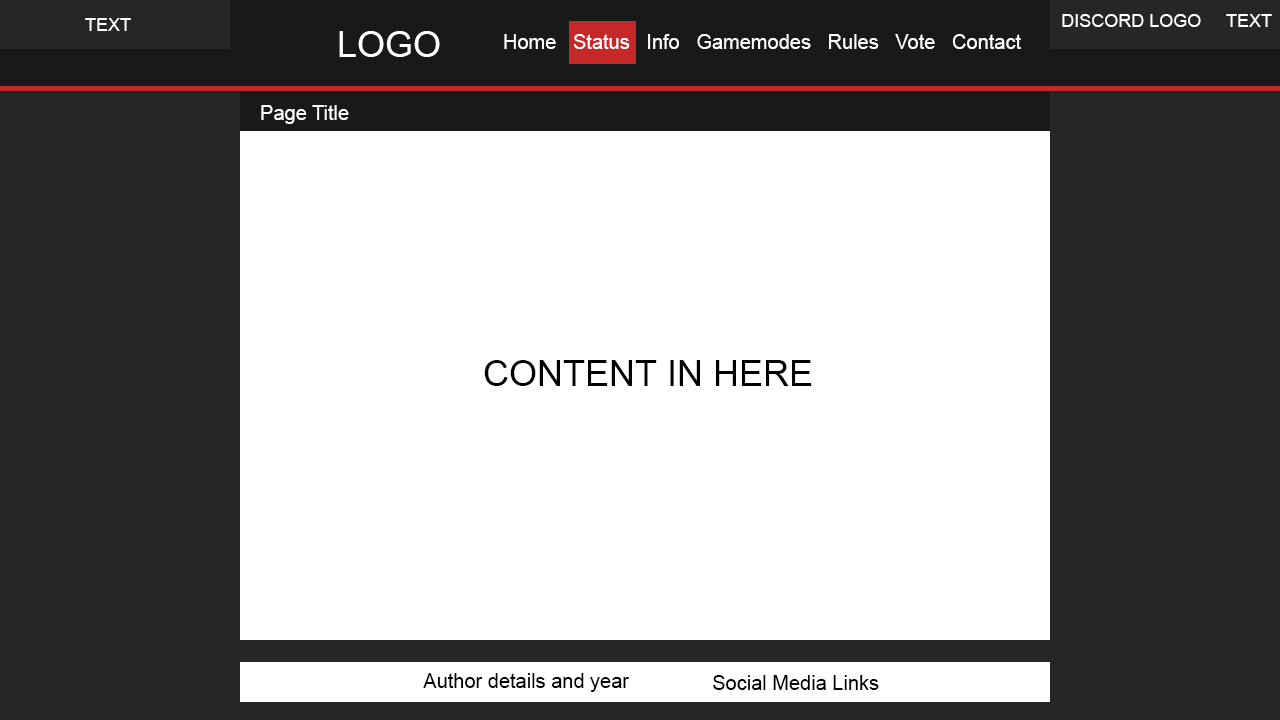
<style>
.page{position:relative;width:1280px;height:720px;background:#ffffff}
.page>*{position:absolute;margin:0}
.t1{font:18px "ArialMT";color:#ffffff}
.t2{font:36px "ArialMT";color:#ffffff}
.t3{font:20px "ArialMT";color:#ffffff}
.t4{font:36px "ArialMT";color:#000000}
.t5{font:20px "ArialMT";color:#000000}
</style>
<div class="page">
<p class="t1" style="left:1062px;top:14px;width:210px;height:13px">DISCORD LOGO     TEXT</p>
<p class="t1" style="left:85px;top:18px;width:46px;height:13px">TEXT</p>
<p class="t2" style="left:339px;top:31px;width:101px;height:26px">LOGO</p>
<p class="t3" style="left:504px;top:34px;width:517px;height:15px">Home   Status   Info   Gamemodes   Rules   Vote   Contact</p>
<p class="t3" style="left:261px;top:105px;width:88px;height:19px">Page Title</p>
<p class="t4" style="left:484px;top:360px;width:328px;height:26px">CONTENT IN HERE</p>
<p class="t5" style="left:423px;top:673px;width:206px;height:19px">Author details and year</p>
<p class="t5" style="left:713px;top:675px;width:166px;height:15px">Social Media Links</p>
</div>
